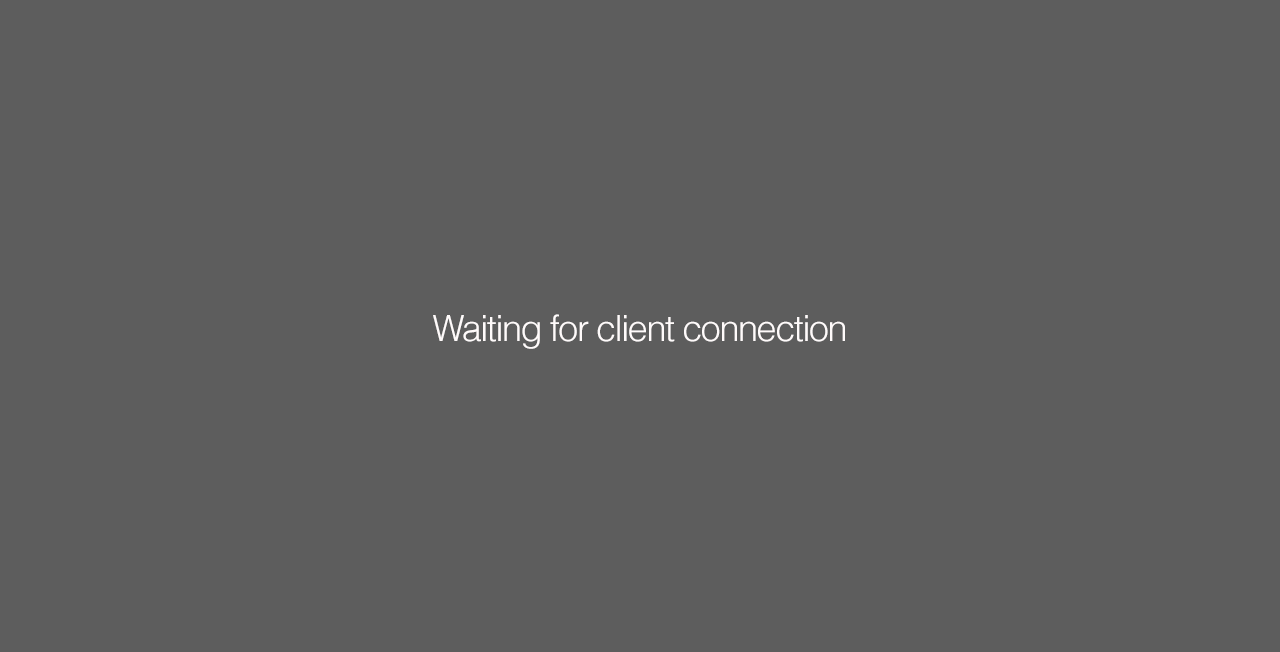
<style>
.page{position:relative;width:1280px;height:652px;background:#5d5d5d}
.page>*{position:absolute;margin:0}
.t1{font:36px "Helvetica-Light";letter-spacing:-0.04em;color:#fffbfb}
</style>
<div class="page">
<p class="t1" style="left:433px;top:314px;width:412px;height:35px">Waiting for client connection</p>
</div>
